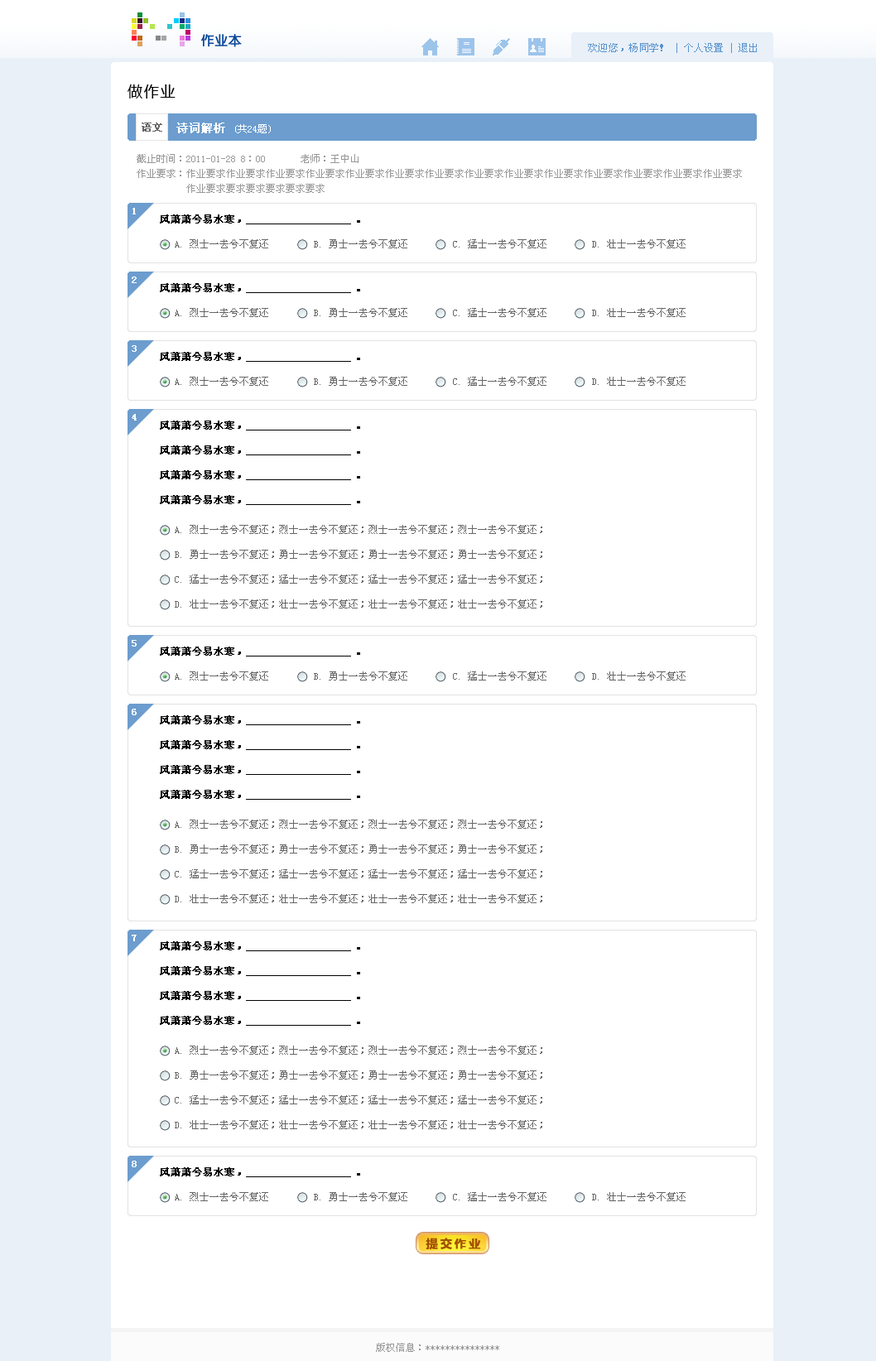
<style>
.page{position:relative;width:876px;height:1361px;background:#ffffff}
.page>*{position:absolute;margin:0}
.t1{font:13.2px "HYe3gj";color:#0a4898;font-weight:bold}
.t2{font:9.9px "SimSun";color:#5893ce}
.t3{font:9.9px "SimSun";letter-spacing:0.025em;color:#5893ce}
.t4{font:14.9px "MicrosoftYaHei";letter-spacing:0.1em;color:#000000}
.t5{font:9.9px/14.9px "SimSun";color:#999999}
.t6{font:9.9px/24.8px "SimSun";color:#666666}
.t7{font:11.6px/24.8px "SimSun";color:#ffffff;font-weight:bold}
.t8{font:9.9px/24.8px "SimSun";color:#ffffff}
.t9{font:9.9px/29.8px "SimSun";color:#999999}
.t10{font:9.9px "SimSun";color:#666666;font-weight:bold}
.t11{font:9.9px "SimSun";color:#ffffff;font-weight:bold}
.t12{font:9.9px/24.8px "SimSun";color:#000000;font-weight:bold}
.t13{font:9.9px/29.8px "SimSun";color:#666666}
.t14{font:11.6px "MicrosoftYaHei";letter-spacing:0.2em;color:#a25100;font-weight:bold}
.t15{font:9.9px "SimSun";color:#999999}
</style>
<div class="page">
<p class="t1" style="left:201px;top:34px;width:41px;height:13px">作业本</p>
<p class="t2" style="left:588px;top:43px;width:169px;height:10px"><span class="t3">欢迎您，杨同学！</span> | 个人设置 | 退出</p>
<p class="t4" style="left:128px;top:84px;width:48px;height:15px">做作业</p>
<p class="t5" style="left:137px;top:123px;width:605px;height:70px"><span class="t6">        </span><span class="t7">诗词解析 </span><span class="t8">(共24题)                                                                                   <br></span><span class="t9">截止时间：2011</span>-01-28 8：00       老师：王中山       <br>作业要求：作业要求作业要求作业要求作业要求作业要求作业要求作业要求作业要求作业要求作业要求作业要求作业要求作业要求作业要求<br>          作业要求要求要求要求要求要求</p>
<p class="t10" style="left:142px;top:123px;width:20px;height:9px">语文</p>
<p class="t11" style="left:132px;top:208px;width:4px;height:6px">1</p>
<p class="t6" style="left:160px;top:214px;width:526px;height:34px"><span class="t12">      风萧萧兮易水寒，                   。<br>          </span>A. 烈士一去兮不复还         B. 勇士一去兮不复还         C. 猛士一去兮不复还         D. 壮士一去兮不复还</p>
<p class="t11" style="left:132px;top:277px;width:5px;height:6px">2</p>
<p class="t6" style="left:160px;top:283px;width:526px;height:34px"><span class="t12">      风萧萧兮易水寒，                   。<br>          </span>A. 烈士一去兮不复还         B. 勇士一去兮不复还         C. 猛士一去兮不复还         D. 壮士一去兮不复还</p>
<p class="t11" style="left:132px;top:345px;width:5px;height:7px">3</p>
<p class="t6" style="left:160px;top:352px;width:526px;height:34px"><span class="t12">      风萧萧兮易水寒，                   。<br>          </span>A. 烈士一去兮不复还         B. 勇士一去兮不复还         C. 猛士一去兮不复还         D. 壮士一去兮不复还</p>
<p class="t11" style="left:132px;top:414px;width:5px;height:7px">4</p>
<p class="t6" style="left:160px;top:421px;width:382px;height:188px"><span class="t12">      风萧萧兮易水寒，                   。<br>      风萧萧兮易水寒，                   。<br>      风萧萧兮易水寒，                   。<br>      风萧萧兮易水寒，                   。<br>          </span><span class="t13">A. 烈士一</span>去兮不复还；烈士一去兮不复还；烈士一去兮不复还；烈士一去兮不复还；         <br>          B. 勇士一去兮不复还；勇士一去兮不复还；勇士一去兮不复还；勇士一去兮不复还；<br>          C. 猛士一去兮不复还；猛士一去兮不复还；猛士一去兮不复还；猛士一去兮不复还；<br>          D. 壮士一去兮不复还；壮士一去兮不复还；壮士一去兮不复还；壮士一去兮不复还；</p>
<p class="t11" style="left:132px;top:640px;width:5px;height:7px">5</p>
<p class="t6" style="left:160px;top:647px;width:526px;height:34px"><span class="t12">      风萧萧兮易水寒，                   。<br>          </span>A. 烈士一去兮不复还         B. 勇士一去兮不复还         C. 猛士一去兮不复还         D. 壮士一去兮不复还</p>
<p class="t11" style="left:132px;top:709px;width:5px;height:6px">6</p>
<p class="t6" style="left:160px;top:715px;width:382px;height:188px"><span class="t12">      风萧萧兮易水寒，                   。<br>      风萧萧兮易水寒，                   。<br>      风萧萧兮易水寒，                   。<br>      风萧萧兮易水寒，                   。<br>          </span><span class="t13">A. 烈士一</span>去兮不复还；烈士一去兮不复还；烈士一去兮不复还；烈士一去兮不复还；         <br>          B. 勇士一去兮不复还；勇士一去兮不复还；勇士一去兮不复还；勇士一去兮不复还；<br>          C. 猛士一去兮不复还；猛士一去兮不复还；猛士一去兮不复还；猛士一去兮不复还；<br>          D. 壮士一去兮不复还；壮士一去兮不复还；壮士一去兮不复还；壮士一去兮不复还；</p>
<p class="t11" style="left:132px;top:935px;width:5px;height:6px">7</p>
<p class="t6" style="left:160px;top:941px;width:382px;height:188px"><span class="t12">      风萧萧兮易水寒，                   。<br>      风萧萧兮易水寒，                   。<br>      风萧萧兮易水寒，                   。<br>      风萧萧兮易水寒，                   。<br>          </span><span class="t13">A. 烈士一</span>去兮不复还；烈士一去兮不复还；烈士一去兮不复还；烈士一去兮不复还；         <br>          B. 勇士一去兮不复还；勇士一去兮不复还；勇士一去兮不复还；勇士一去兮不复还；<br>          C. 猛士一去兮不复还；猛士一去兮不复还；猛士一去兮不复还；猛士一去兮不复还；<br>          D. 壮士一去兮不复还；壮士一去兮不复还；壮士一去兮不复还；壮士一去兮不复还；</p>
<p class="t11" style="left:132px;top:1161px;width:5px;height:6px">8</p>
<p class="t6" style="left:160px;top:1167px;width:526px;height:34px"><span class="t12">      风萧萧兮易水寒，                   。<br>          </span>A. 烈士一去兮不复还         B. 勇士一去兮不复还         C. 猛士一去兮不复还         D. 壮士一去兮不复还</p>
<p class="t14" style="left:426px;top:1238px;width:55px;height:12px">提交作业</p>
<p class="t15" style="left:376px;top:1343px;width:123px;height:9px">版权信息：***************</p>
</div>
